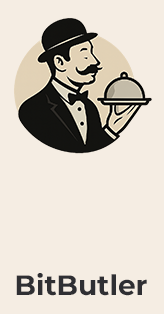
<style>
.page{position:relative;width:164px;height:314px;background:#f5ede3}
.page>*{position:absolute;margin:0}
.t1{font:28px "Montserrat-Bold";color:#2f2f33}
</style>
<div class="page">
<p class="t1" style="left:16px;top:273px;width:131px;height:23px">BitButler</p>
</div>
